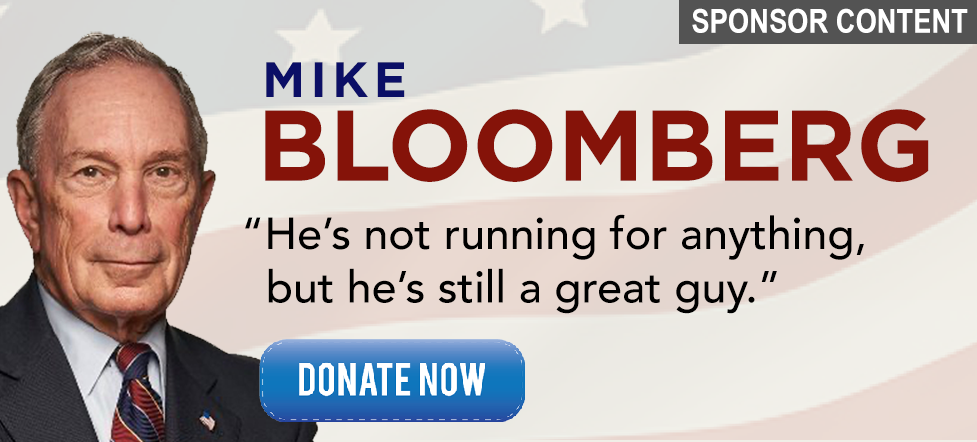
<style>
.page{position:relative;width:977px;height:442px}
.page>*{position:absolute;margin:0}
.t1{font:33.3px "ArialNarrow-Bold";color:#ffffff}
.t2{font:49.8px "Gotham-Bold";letter-spacing:0.1em;color:#0b0f66}
.t3{font:100px "Gotham-Bold";color:#851309}
.t4{font:44.6px "Avenir-Medium";color:#000000}
</style>
<div class="page">
<p class="t1" style="left:692px;top:8px;width:276px;height:25px">SPONSOR CONTENT</p>
<p class="t2" style="left:266px;top:62px;width:139px;height:35px">MIKE</p>
<p class="t3" style="left:265px;top:109px;width:664px;height:73px">BLOOMBERG</p>
<p class="t4" style="left:245px;top:214px;width:619px;height:100px">“He’s not running for anything, <br>  but he’s still a great guy.”</p>
</div>
